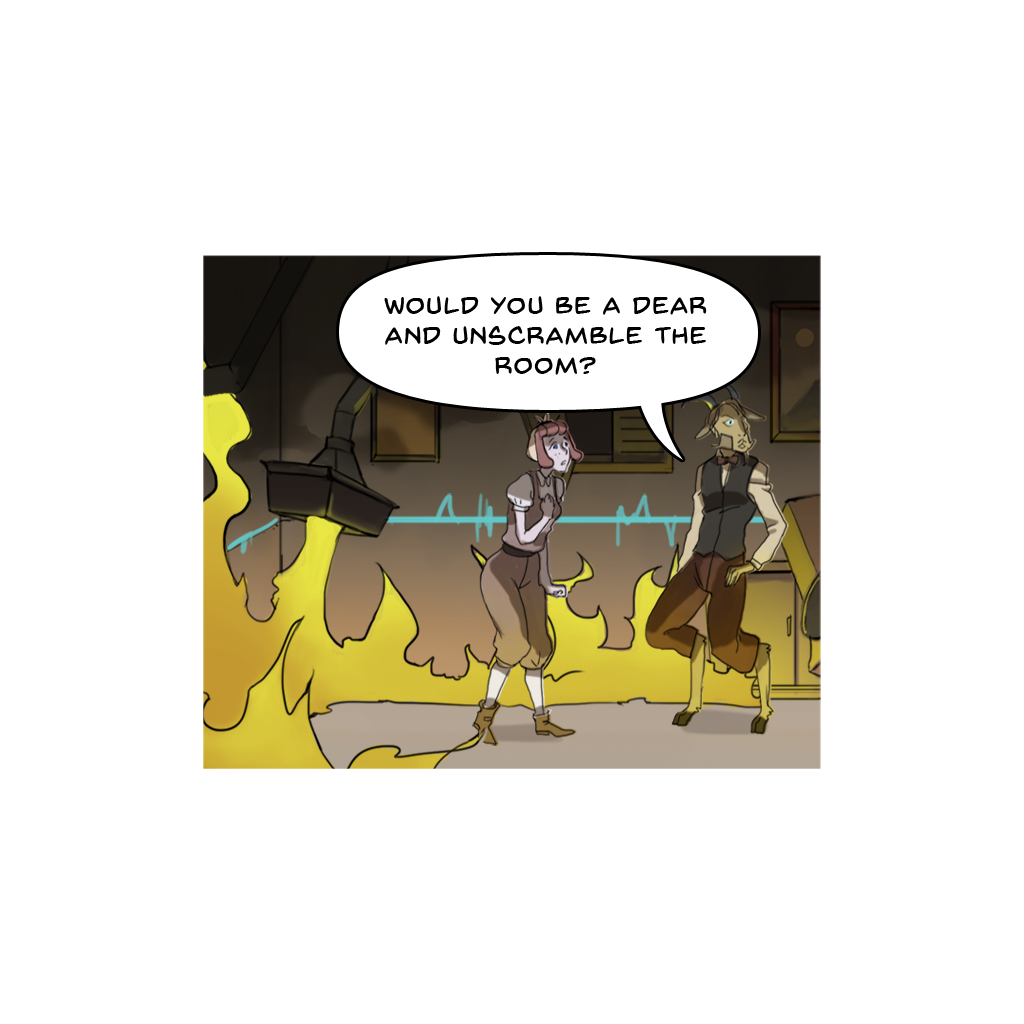
<style>
.page{position:relative;width:1024px;height:1024px;background:#ffffff}
.page>*{position:absolute;margin:0}
.t1{font:25px "BackIssuesBB";letter-spacing:0.05em;color:#000000}
</style>
<div class="page">
<p class="t1" style="left:384px;top:296px;width:323px;height:79px;text-align:center">would you be a dear <br>And unscramble the <br>room?</p>
</div>
